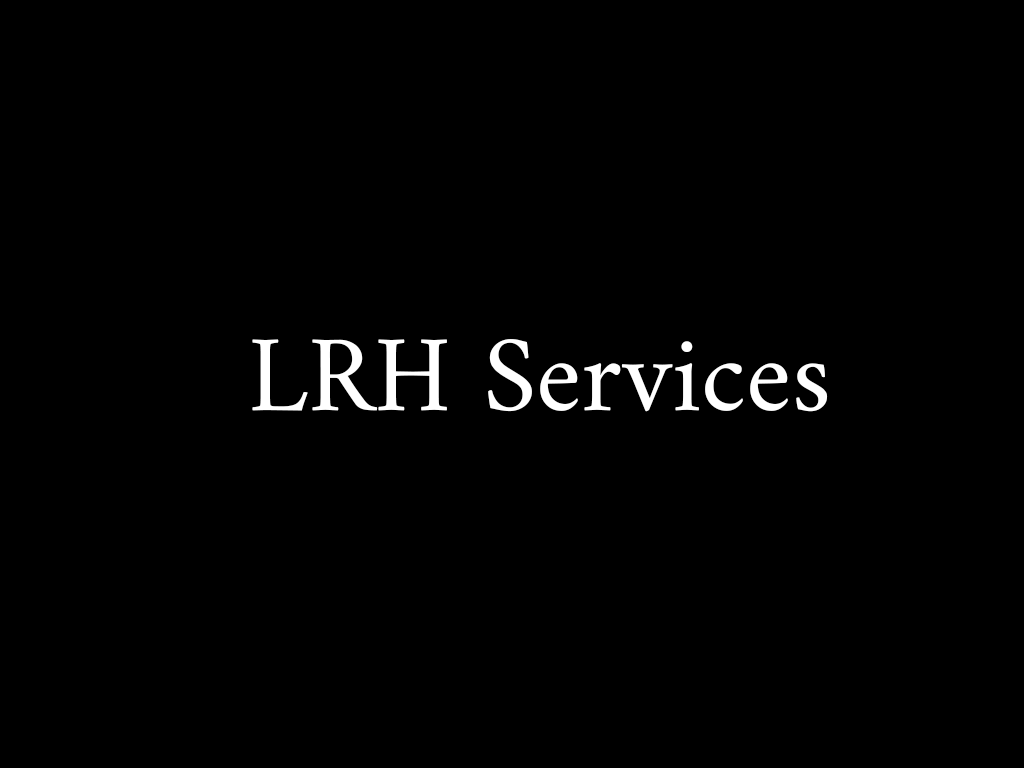
<style>
.page{position:relative;width:1024px;height:768px;background:#000000}
.page>*{position:absolute;margin:0}
.t1{font:108.7px "Amiri-Regular";color:#ffffff}
</style>
<div class="page">
<p class="t1" style="left:252px;top:339px;width:576px;height:73px">LRH Services</p>
</div>
